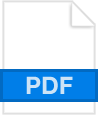
<style>
.page{position:relative;width:98px;height:115px;background:#ffffff}
.page>*{position:absolute;margin:0}
.t1{font:24px "HelveticaNeue-Bold";color:#cce3f6}
</style>
<div class="page">
<p class="t1" style="left:26px;top:76px;width:47px;height:18px">PDF</p>
</div>
